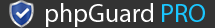
<style>
.page{position:relative;width:215px;height:28px;background:#333333}
.page>*{position:absolute;margin:0}
.t1{font:26px "MyriadPro-Regular";color:#ffffff}
.t2{font:26px "MyriadPro-Regular";color:#1ac6ff}
</style>
<div class="page">
<p class="t1" style="left:46px;top:3px;width:159px;height:24px">phpGuard <span class="t2">PRO</span></p>
</div>
